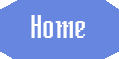
<style>
.page{position:relative;width:119px;height:59px;background:#6686df}
.page>*{position:absolute;margin:0}
.t1{font:33px "Bitmap";color:#ffffff}
</style>
<div class="page">
<p class="t1" style="left:31px;top:15px;width:54px;height:23px">Home</p>
</div>
